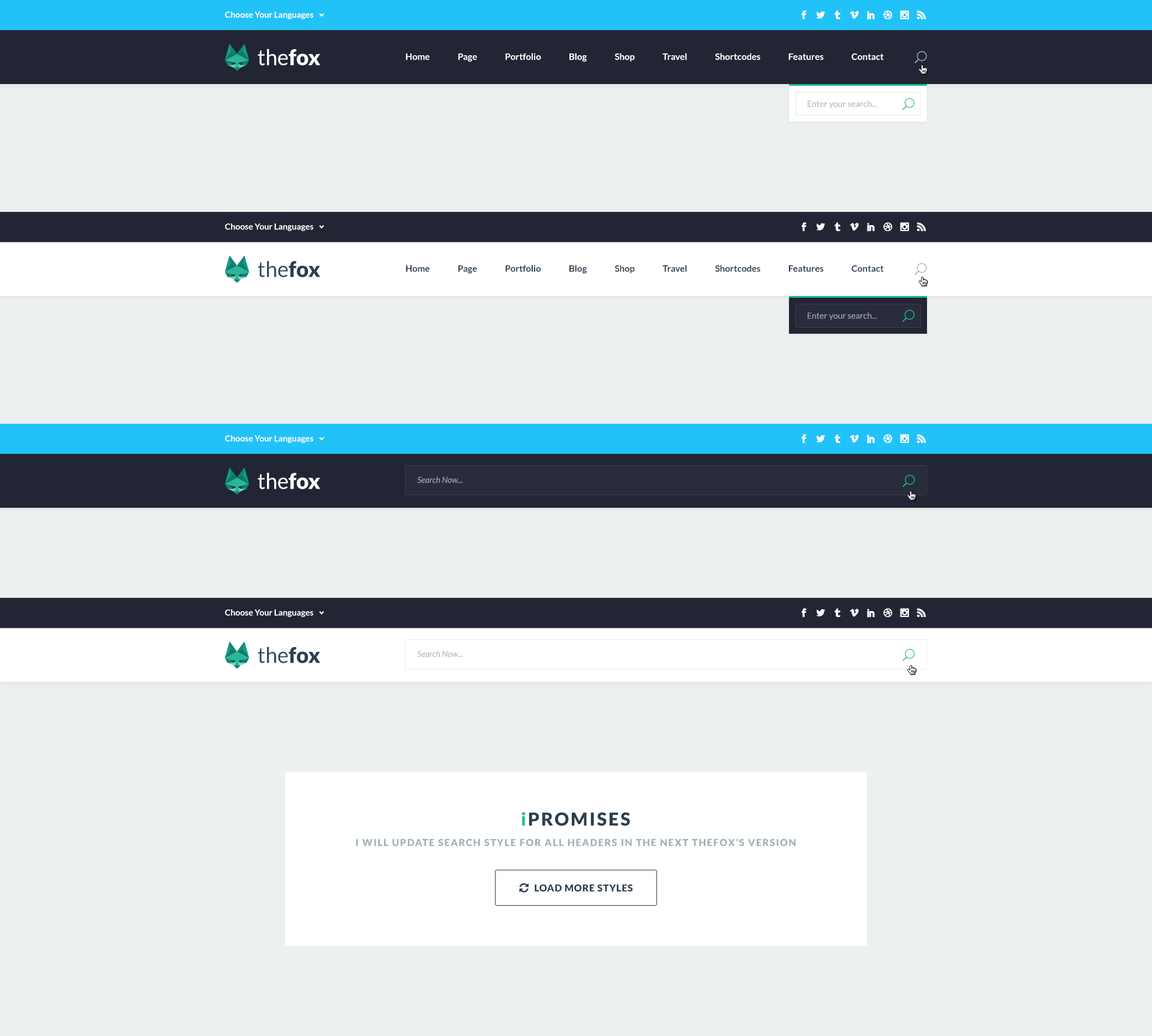
<style>
.page{position:relative;width:1152px;height:1036px;background:#ecf0f1}
.page>*{position:absolute;margin:0}
.t1{font:8.4px "Lato-Bold";color:#ffffff}
.t2{font:21.6px "Lato-Regular";color:#ffffff}
.t3{font:21.6px "Lato-Black";color:#ffffff}
.t4{font:9px "Lato-Bold";color:#ffffff}
.t5{font:8.4px "Lato-Regular";color:#a1b1bc}
.t6{font:21.6px "Lato-Regular";color:#34495e}
.t7{font:21.6px "Lato-Black";color:#2c3e50}
.t8{font:9px "Lato-Bold";color:#2c3e50}
.t9{font:8.4px "Lato-Italic";color:#a1b1bc}
.t10{font:18px "Lato-Black";letter-spacing:0.1em;color:#2c3e50}
.t11{font:18px "Lato-Black";letter-spacing:0.1em;color:#1abc9c}
.t12{font:9.6px "Lato-Black";letter-spacing:0.1em;color:#a1b1bc}
.t13{font:9.6px "Lato-Black";letter-spacing:0.05em;color:#2c3e50}
</style>
<div class="page">
<p class="t1" style="left:225px;top:11px;width:89px;height:8px">Choose Your Languages</p>
<p class="t2" style="left:257px;top:49px;width:63px;height:16px">the<span class="t3">fox</span></p>
<p class="t4" style="left:406px;top:53px;width:478px;height:9px">Home                Page                Portfolio                Blog                Shop                Travel                Shortcodes                Features                Contact</p>
<p class="t5" style="left:808px;top:100px;width:69px;height:9px">Enter your search...</p>
<p class="t1" style="left:225px;top:223px;width:89px;height:8px">Choose Your Languages</p>
<p class="t6" style="left:257px;top:260px;width:63px;height:17px">the<span class="t7">fox</span></p>
<p class="t8" style="left:406px;top:265px;width:478px;height:9px">Home                Page                Portfolio                Blog                Shop                Travel                Shortcodes                Features                Contact</p>
<p class="t5" style="left:808px;top:312px;width:69px;height:8px">Enter your search...</p>
<p class="t1" style="left:225px;top:435px;width:89px;height:8px">Choose Your Languages</p>
<p class="t2" style="left:257px;top:472px;width:63px;height:17px">the<span class="t3">fox</span></p>
<p class="t9" style="left:417px;top:476px;width:46px;height:7px">Search Now...</p>
<p class="t1" style="left:225px;top:609px;width:89px;height:8px">Choose Your Languages</p>
<p class="t6" style="left:257px;top:646px;width:63px;height:17px">the<span class="t7">fox</span></p>
<p class="t9" style="left:417px;top:650px;width:46px;height:7px">Search Now...</p>
<p class="t10" style="left:521px;top:812px;width:109px;height:14px"><span class="t11">i</span>PROMISES</p>
<p class="t12" style="left:356px;top:838px;width:440px;height:8px">I WILL UPDATE SEARCH STYLE FOR ALL HEADERS IN THE NEXT THEFOX’S VERSION</p>
<p class="t13" style="left:535px;top:884px;width:98px;height:8px">LOAD MORE STYLES</p>
</div>
